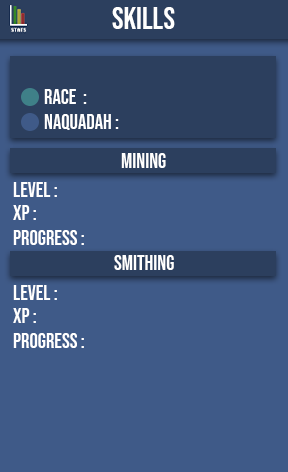
<style>
.page{position:relative;width:288px;height:472px;background:#3f5a88}
.page>*{position:absolute;margin:0}
.t1{font:30.8px "BebasNeue-Regular";color:#ffffff}
.t2{font:20.8px "BebasNeue-Regular";color:#ffffff}
</style>
<div class="page">
<p class="t1" style="left:112px;top:7px;width:63px;height:22px">SKILLS</p>
<p class="t2" style="left:44px;top:89px;width:43px;height:15px">Race  :</p>
<p class="t2" style="left:44px;top:114px;width:75px;height:16px">NAQUADAH :</p>
<p class="t2" style="left:121px;top:153px;width:45px;height:15px">MINING</p>
<p class="t2" style="left:13px;top:182px;width:44px;height:15px">LEvel :</p>
<p class="t2" style="left:13px;top:205px;width:23px;height:15px">XP :</p>
<p class="t2" style="left:13px;top:230px;width:71px;height:15px">PROGRESS :</p>
<p class="t2" style="left:114px;top:255px;width:60px;height:15px">SMITHING</p>
<p class="t2" style="left:13px;top:285px;width:44px;height:15px">LEvel :</p>
<p class="t2" style="left:13px;top:308px;width:23px;height:15px">XP :</p>
<p class="t2" style="left:13px;top:333px;width:71px;height:15px">PROGRESS :</p>
</div>
